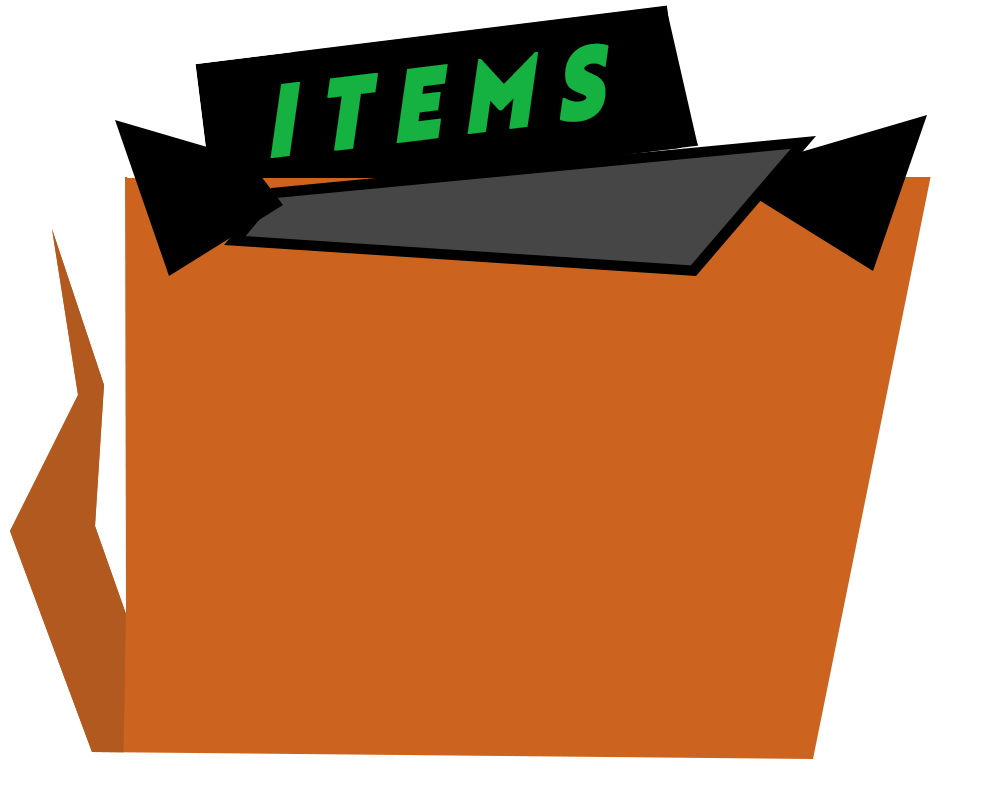
<style>
.page{position:relative;width:984px;height:809px;background:#cc631e}
.page>*{position:absolute;margin:0}
.t1{font:97.9px "Brother-1816-Black-Italic";letter-spacing:0.26em;color:#15b241;font-weight:bold;font-style:italic;scale:0.81 1}
</style>
<div class="page">
<p class="t1" style="left:270px;top:43px;width:339px;height:115px;rotate:-7deg">ITEMS</p>
</div>
